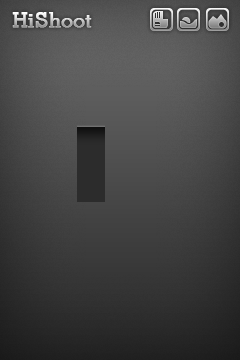
<style>
.page{position:relative;width:240px;height:360px}
.page>*{position:absolute;margin:0}
.t1{font:20.4px "GeometricSlab703BT-Medium";font-weight:bold}
</style>
<div class="page">
<p class="t1" style="left:12px;top:12px;width:80px;height:16px">HiShoot</p>
</div>
